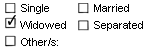
<style>
.page{position:relative;width:150px;height:48px;background:#ffffff}
.page>*{position:absolute;margin:0}
.t1{font:10.7px "ArialMT";color:#000000}
</style>
<div class="page">
<p class="t1" style="left:21px;top:4px;width:28px;height:10px">Single</p>
<p class="t1" style="left:94px;top:4px;width:35px;height:8px">Married</p>
<p class="t1" style="left:20px;top:21px;width:46px;height:8px">Widowed</p>
<p class="t1" style="left:94px;top:21px;width:49px;height:10px">Separated</p>
<p class="t1" style="left:21px;top:38px;width:37px;height:8px">Other/s:</p>
</div>
